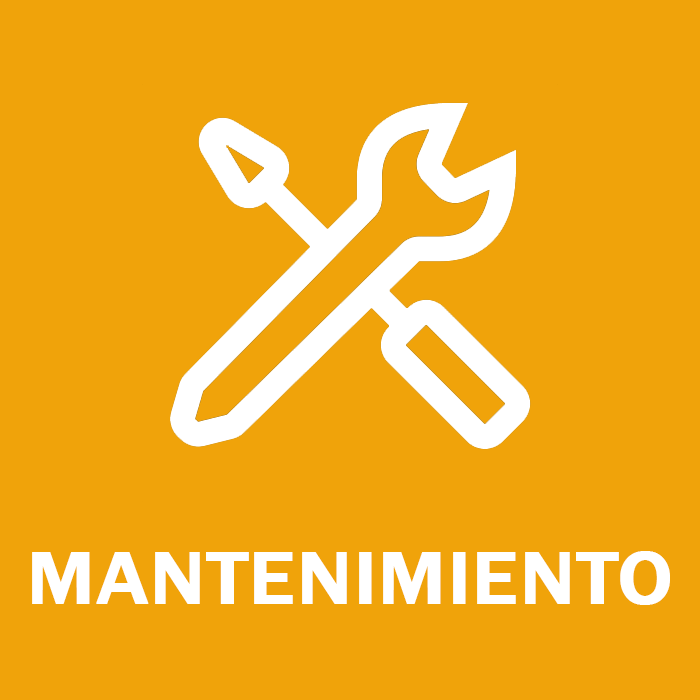
<style>
.page{position:relative;width:700px;height:700px;background:#f0a30a}
.page>*{position:absolute;margin:0}
.t1{font:77px "FranklinGothic-Medium";color:#ffffff;font-weight:bold;scale:1.09 1}
</style>
<div class="page">
<p class="t1" style="left:32px;top:551px;width:638px;height:54px">MANTENIMIENTO</p>
</div>
